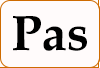
<style>
.page{position:relative;width:100px;height:68px;background:#fffbfb}
.page>*{position:absolute;margin:0}
.t1{font:50px "BookAntiqua-Bold";color:#000000}
</style>
<div class="page">
<p class="t1" style="left:13px;top:16px;width:74px;height:35px">Pas</p>
</div>
